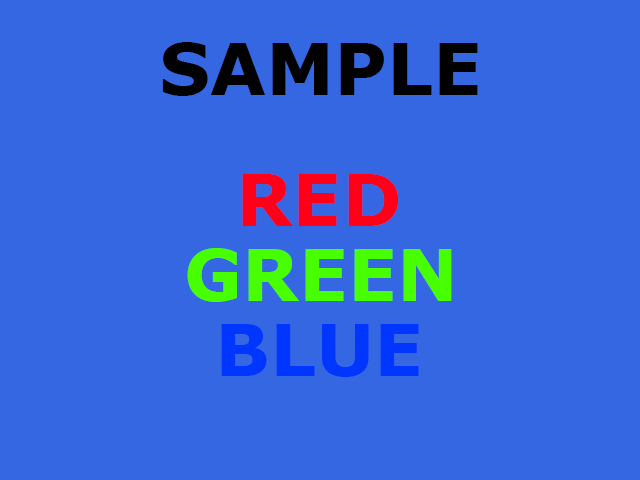
<style>
.page{position:relative;width:640px;height:480px;background:#3667e2}
.page>*{position:absolute;margin:0}
.t1{font:72px "Verdana-Bold";color:#000000}
.t2{font:72px "Verdana-Bold";color:#ff0018}
.t3{font:72px "Verdana-Bold";color:#48ff00}
.t4{font:72px "Verdana-Bold";color:#0036ff}
</style>
<div class="page">
<p class="t1" style="left:162px;top:42px;width:316px;height:54px">SAMPLE</p>
<p class="t2" style="left:242px;top:174px;width:157px;height:52px">RED</p>
<p class="t3" style="left:187px;top:248px;width:265px;height:54px">GREEN</p>
<p class="t4" style="left:221px;top:324px;width:198px;height:53px">BLUE</p>
</div>
